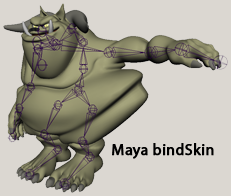
<style>
.page{position:relative;width:231px;height:196px;background:#dbd7d1}
.page>*{position:absolute;margin:0}
.t1{font:15.9px "MyriadPro-Regular";color:#000000;font-weight:bold}
</style>
<div class="page">
<p class="t1" style="left:112px;top:143px;width:102px;height:16px">Maya bindSkin</p>
</div>
